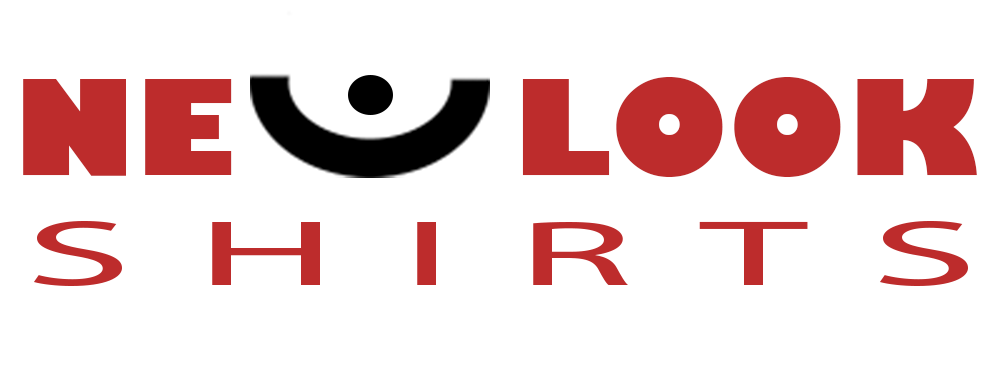
<style>
.page{position:relative;width:1000px;height:375px;background:#ffffff}
.page>*{position:absolute;margin:0}
.t1{font:129.2px "GillSans-UltraBold";color:#bd2c2c;scale:1.08 1}
.t2{font:93.8px "MyriadPro-Regular";letter-spacing:0.3em;color:#bd2c2c;scale:2.3 1}
</style>
<div class="page">
<p class="t1" style="left:23px;top:77px;width:954px;height:100px">NE      LOOK</p>
<p class="t2" style="left:33px;top:221px;width:935px;height:65px">SHIRTS</p>
</div>
